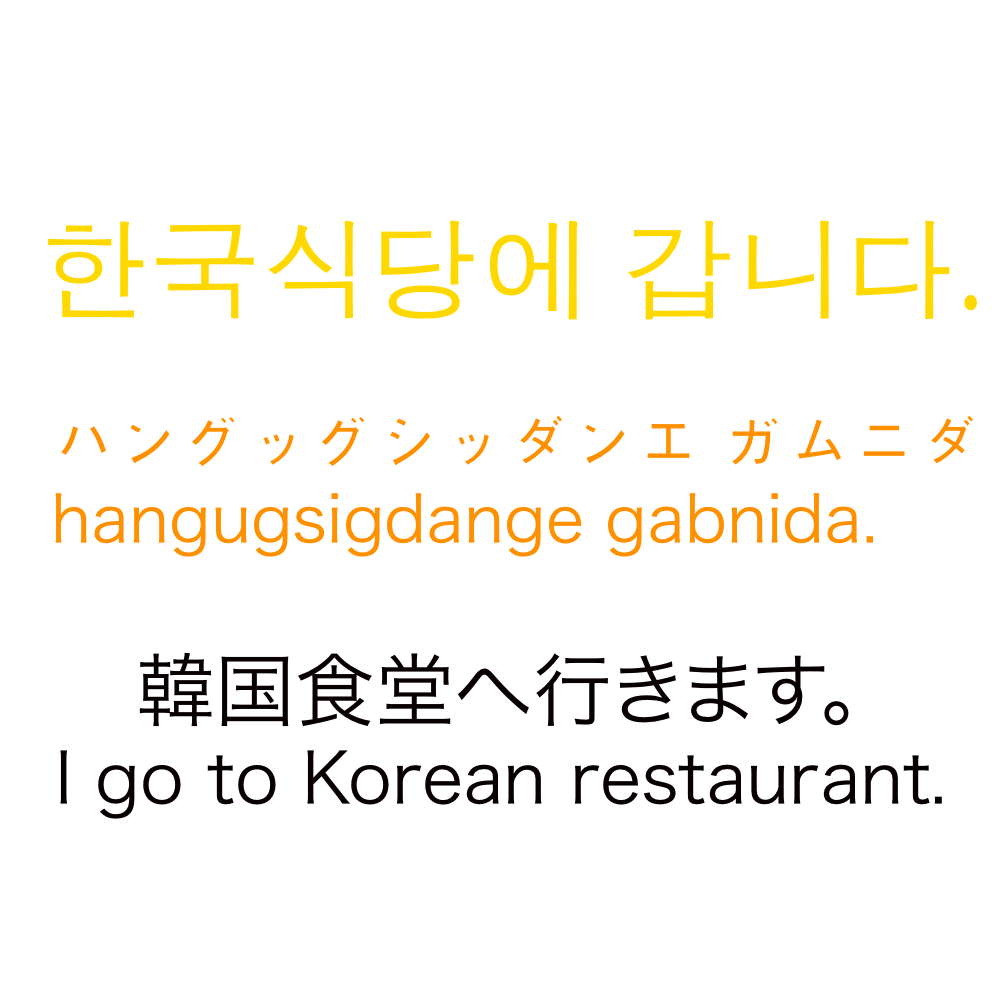
<style>
.page{position:relative;width:1000px;height:1000px;background:#ffffff}
.page>*{position:absolute;margin:0}
.t1{font:110px "AppleGothic";color:#ffd800}
.t2{font:65px "HiraKakuProN-W3";color:#ff9000}
.t3{font:65px "AppleGothic";color:#ff9000}
.t4{font:70px "HiraKakuProN-W3";color:#080000}
.t5{font:80px "HiraKakuProN-W3";color:#080000}
</style>
<div class="page">
<p class="t1" style="left:48px;top:220px;width:929px;height:100px">한국식당에 갑니다.</p>
<p class="t2" style="left:55px;top:415px;width:918px;height:142px"><span class="t3">ハングッグシッダンエ ガムニダ<br></span>hangugsigdange gabnida.</p>
<p class="t4" style="left:60px;top:652px;width:882px;height:167px"><span class="t5">　韓国食堂へ行きます。<br></span>I go to Korean restaurant.</p>
</div>
